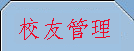
<style>
.page{position:relative;width:134px;height:51px;background:#a0bfdd}
.page>*{position:absolute;margin:0}
.t1{font:24px "STFangsong";color:#eb0a2a}
</style>
<div class="page">
<p class="t1" style="left:19px;top:18px;width:91px;height:22px">校友管理</p>
</div>
